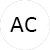
<style>
.page{position:relative;width:50px;height:50px;background:#ffffff}
.page>*{position:absolute;margin:0}
.t1{font:24px "Calibri";color:#000000}
</style>
<div class="page">
<p class="t1" style="left:10px;top:17px;width:27px;height:15px">AC</p>
</div>
